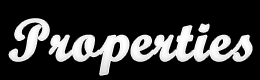
<style>
.page{position:relative;width:260px;height:80px;background:#000000}
.page>*{position:absolute;margin:0}
.t1{font:58.3px "ScriptMTBold";letter-spacing:0.025em;color:#f8f8f8}
</style>
<div class="page">
<p class="t1" style="left:9px;top:19px;width:243px;height:56px">Properties</p>
</div>
